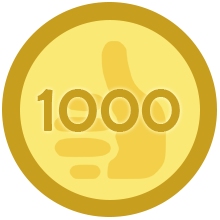
<style>
.page{position:relative;width:220px;height:220px;background:#fae975}
.page>*{position:absolute;margin:0}
.t1{font:70px "BerlinSansFB-Reg";color:#c89e1e}
</style>
<div class="page">
<p class="t1" style="left:37px;top:89px;width:143px;height:43px">1000</p>
</div>
